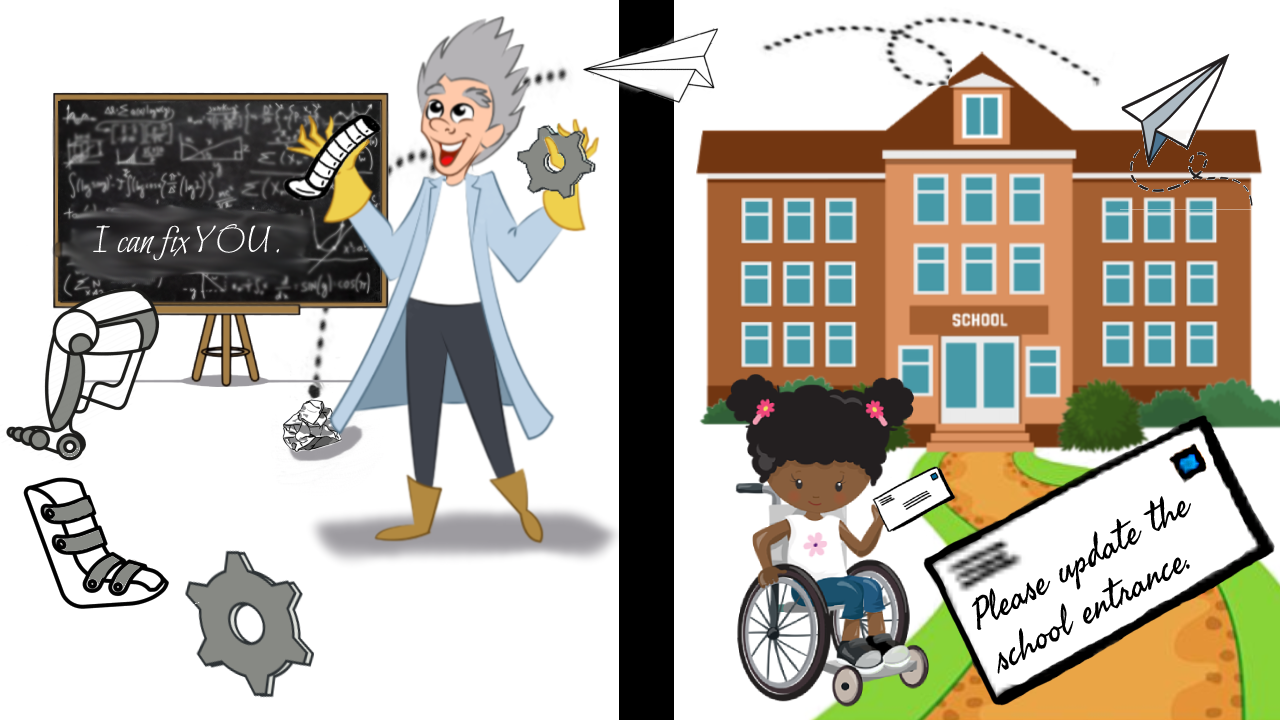
<style>
.page{position:relative;width:1280px;height:720px;background:#ffffff}
.page>*{position:absolute;margin:0}
.t1{font:39.7px "Bilbo-Regular";color:#ffffff}
.t2{font:39.7px "Fasthand-Regular";color:#000000}
</style>
<div class="page">
<p class="t1" style="left:93px;top:224px;width:187px;height:37px">I can fix YOU.</p>
<p class="t2" style="left:972px;top:496px;width:220px;height:178px;rotate:-29deg">Please update the <br>school entrance.</p>
</div>
